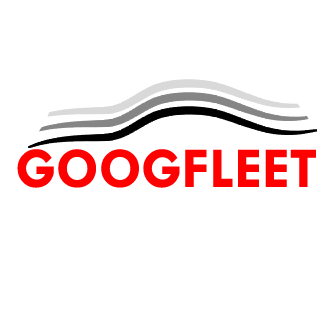
<style>
.page{position:relative;width:326px;height:326px;background:#ffffff}
.page>*{position:absolute;margin:0}
.t1{font:58px "TwCenMT-Bold";color:#ff0000}
</style>
<div class="page">
<p class="t1" style="left:17px;top:149px;width:299px;height:39px">GOOGFLEET</p>
</div>
